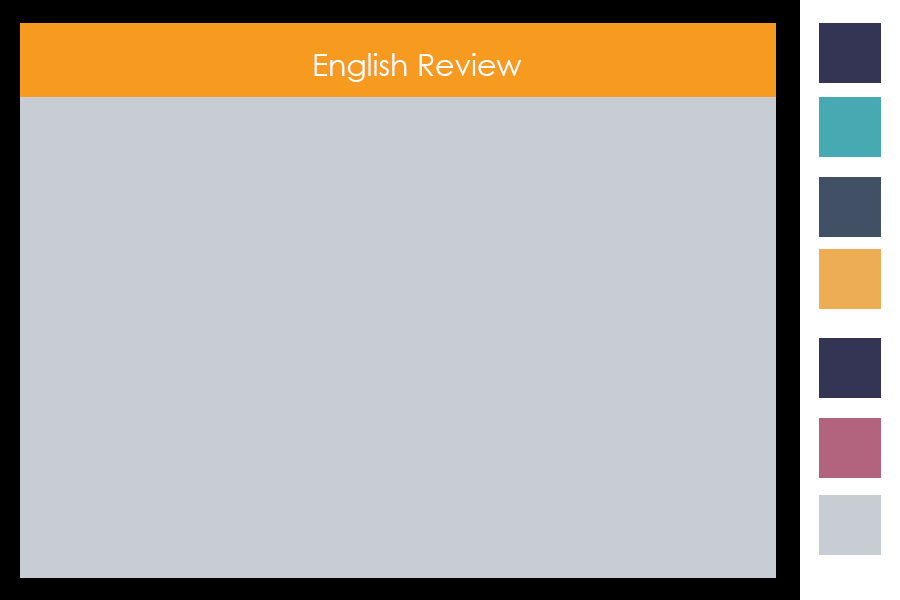
<style>
.page{position:relative;width:900px;height:600px;background:#c8ccd3}
.page>*{position:absolute;margin:0}
.t1{font:30px "CenturyGothic";color:#fefefe}
</style>
<div class="page">
<p class="t1" style="left:314px;top:53px;width:208px;height:29px">English Review</p>
</div>
